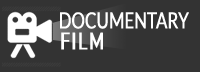
<style>
.page{position:relative;width:200px;height:72px;background:#333333}
.page>*{position:absolute;margin:0}
.t1{font:21.8px "Lato-Regular";letter-spacing:-0.02em;color:#ffffff;text-transform:uppercase;font-weight:bold;scale:0.77 1}
.t2{font:21.5px "AgencyFB-Reg";letter-spacing:-0.02em;color:#ffffff;text-transform:uppercase;font-weight:bold;scale:1.5 1}
</style>
<div class="page">
<p class="t1" style="left:60px;top:12px;width:129px;height:17px">Documentary</p>
<p class="t2" style="left:61px;top:32px;width:42px;height:18px">Film</p>
</div>
